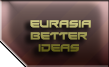
<style>
.page{position:relative;width:109px;height:67px}
.page>*{position:absolute;margin:0}
.t1{font:10px "Xirod-Regular";scale:0.96 1}
.t2{font:9.1px "Xirod-Regular";scale:0.96 1}
</style>
<div class="page">
<p class="t1" style="left:30px;top:20px;width:61px;height:32px"><span class="t2"> </span> EURASIA <br>  BETTER <br>    IDEAS</p>
</div>
